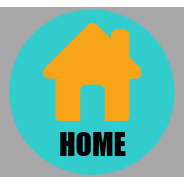
<style>
.page{position:relative;width:184px;height:184px;background:#33cccc}
.page>*{position:absolute;margin:0}
.t1{font:30px "Impact";color:#000000}
</style>
<div class="page">
<p class="t1" style="left:60px;top:132px;width:66px;height:24px">HOME</p>
</div>
